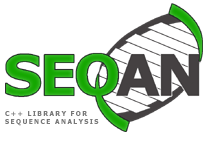
<style>
.page{position:relative;width:220px;height:150px;background:#ffffff}
.page>*{position:absolute;margin:0}
.t1{font:6.8px "Tahoma-Bold";letter-spacing:0.2em;color:#787878}
</style>
<div class="page">
<p class="t1" style="left:5px;top:111px;width:94px;height:15px">C++ LIBRARY FOR<br>SEQUENCE ANALYSIS</p>
</div>
